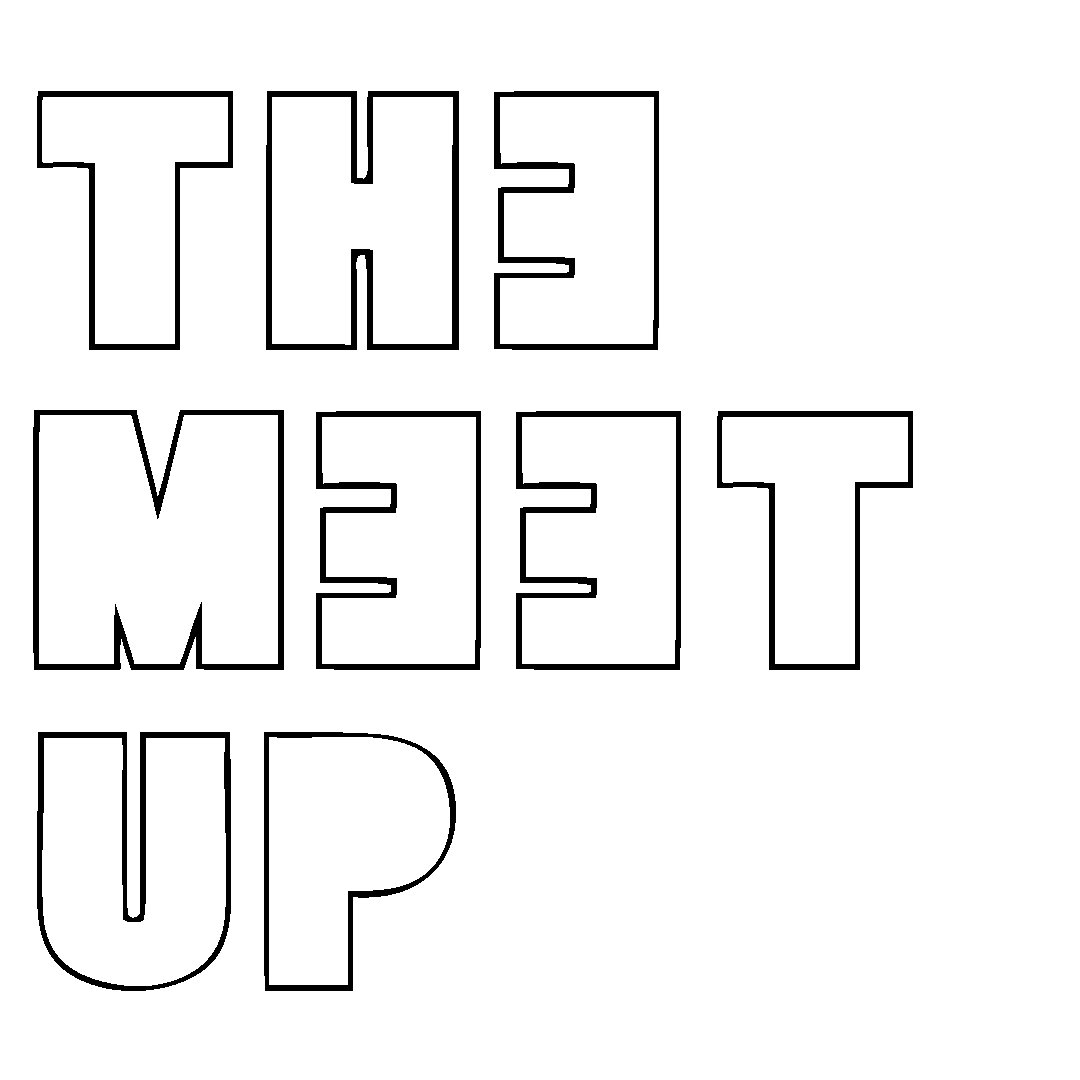
<style>
.page{position:relative;width:1080px;height:1080px;background:#ffffff}
.page>*{position:absolute;margin:0}
.t1{font:369.8px/320.5px "MANIFIESTO";letter-spacing:0.025em;color:#000000}
</style>
<div class="page">
<p class="t1" style="left:33px;top:91px;width:880px;height:900px">The <br>Meet <br>Up</p>
</div>
